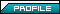
<style>
.page{position:relative;width:60px;height:14px;background:#ffffff}
.page>*{position:absolute;margin:0}
.t1{font:8px "BitDustTwo";color:#ffffff}
</style>
<div class="page">
<p class="t1" style="left:14px;top:6px;width:37px;height:5px">PROFILE</p>
</div>
